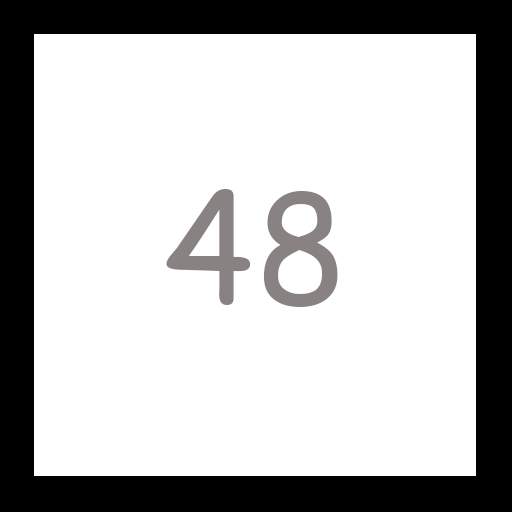
<style>
.page{position:relative;width:512px;height:512px;background:#ffffff}
.page>*{position:absolute;margin:0}
.t1{font:150px "ComicSansMS";color:#898282}
</style>
<div class="page">
<p class="t1" style="left:166px;top:189px;width:172px;height:118px">48</p>
</div>
